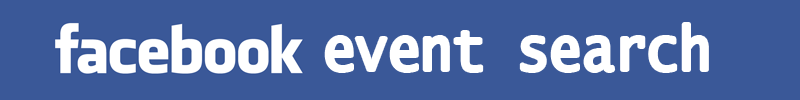
<style>
.page{position:relative;width:800px;height:100px;background:#3a5898}
.page>*{position:absolute;margin:0}
.t1{font:60px "LucidaConsole";color:#ffffff;scale:0.89 1}
</style>
<div class="page">
<p class="t1" style="left:326px;top:24px;width:381px;height:47px">event search</p>
</div>
